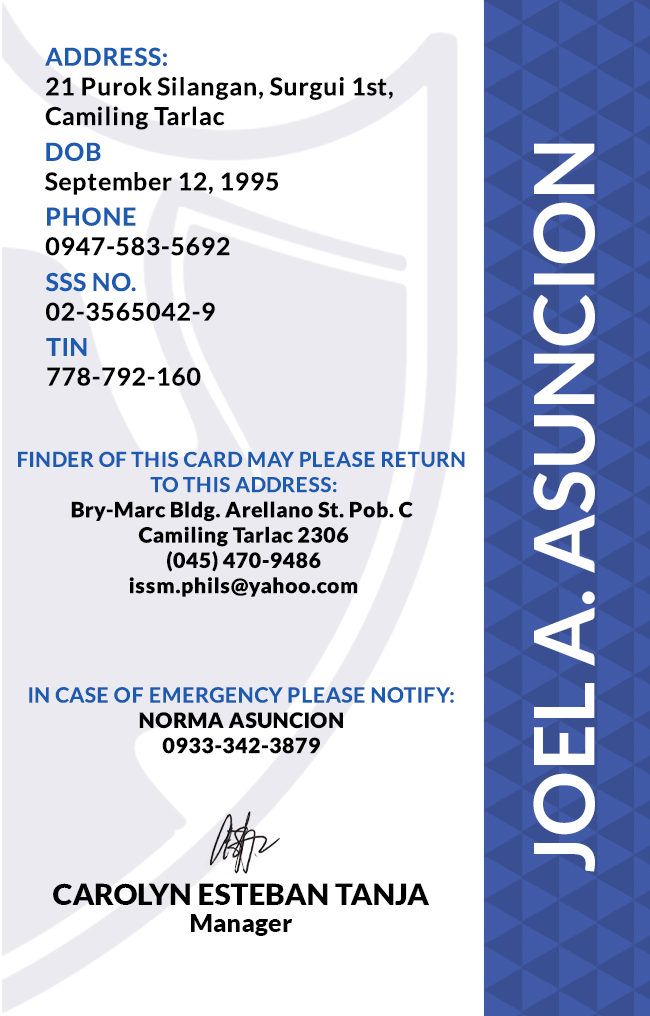
<style>
.page{position:relative;width:650px;height:1016px;background:#ffffff}
.page>*{position:absolute;margin:0}
.t1{font:24.7px/29.6px "Lato-Bold";letter-spacing:0.025em;color:#000000}
.t2{font:83.3px "Lato-Bold";color:#ffffff}
.t3{font:24.7px/29.6px "Lato-Bold";letter-spacing:0.025em}
.t4{font:21.1px "Lato-Black";letter-spacing:0.025em}
.t5{font:20.5px/25.3px "Lato-Bold";letter-spacing:0.025em;text-transform:uppercase}
.t6{font:21.1px/25.3px "Lato-Bold";letter-spacing:0.025em}
.t7{font:29.5px "Lato-Black";color:#000000}
.t8{font:25px "Lato-Black";color:#000000}
</style>
<div class="page">
<p class="t1" style="left:45px;top:47px;width:348px;height:83px">ADDRESS:<br>21 Purok Silangan, Surgui 1st,<br>Camiling Tarlac</p>
<p class="t1" style="left:45px;top:142px;width:234px;height:53px">DOB<br>September 12, 1995</p>
<p class="t2" style="left:533px;top:143px;width:62px;height:729px;rotate:-90deg">JOEL A. ASUNCION</p>
<p class="t3" style="left:45px;top:207px;width:185px;height:49px">PHONE <br>0947-583-5692</p>
<p class="t3" style="left:45px;top:272px;width:170px;height:49px">SSS NO.<br>02-3565042-9</p>
<p class="t1" style="left:46px;top:338px;width:155px;height:48px">TIN<br>778-792-160</p>
<p class="t4" style="left:18px;top:451px;width:447px;height:146px;text-align:center"><span class="t5">Finder of this card may please return <br>to this address:<br></span>Bry-Marc Bldg. Arellano St. Pob. C <br>Camiling Tarlac 2306<br>(045) 470-9486<br>issm.phils@yahoo.com</p>
<p class="t6" style="left:29px;top:687px;width:425px;height:67px;text-align:center">IN CASE OF EMERGENCY PLEASE NOTIFY:<br><span class="t4">NORMA ASUNCION<br>0933-342-3879</span></p>
<p class="t7" style="left:53px;top:883px;width:376px;height:22px">CAROLYN ESTEBAN TANJA</p>
<p class="t8" style="left:191px;top:914px;width:102px;height:22px">Manager</p>
</div>
